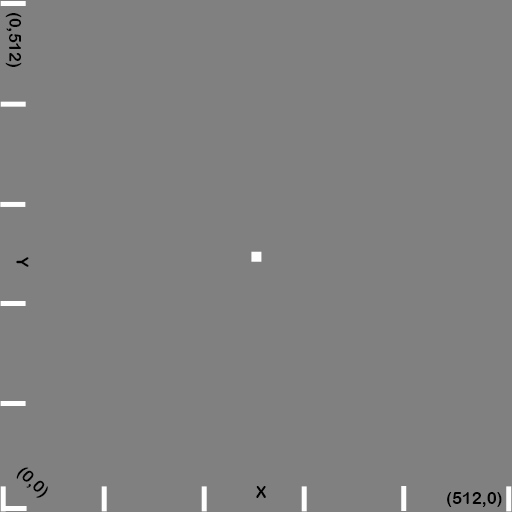
<style>
.page{position:relative;width:512px;height:512px;background:#808080}
.page>*{position:absolute;margin:0}
.t1{font:16.6px "ArialRoundedMTBold";color:#000000}
</style>
<div class="page">
<p class="t1" style="left:5px;top:13px;width:17px;height:54px;rotate:90deg">(0,512)</p>
<p class="t1" style="left:16px;top:257px;width:13px;height:10px;rotate:90deg">Y</p>
<p class="t1" style="left:16px;top:467px;width:32px;height:31px;rotate:45deg">(0,0)</p>
<p class="t1" style="left:256px;top:486px;width:10px;height:12px">X</p>
<p class="t1" style="left:447px;top:492px;width:55px;height:15px">(512,0)</p>
</div>
